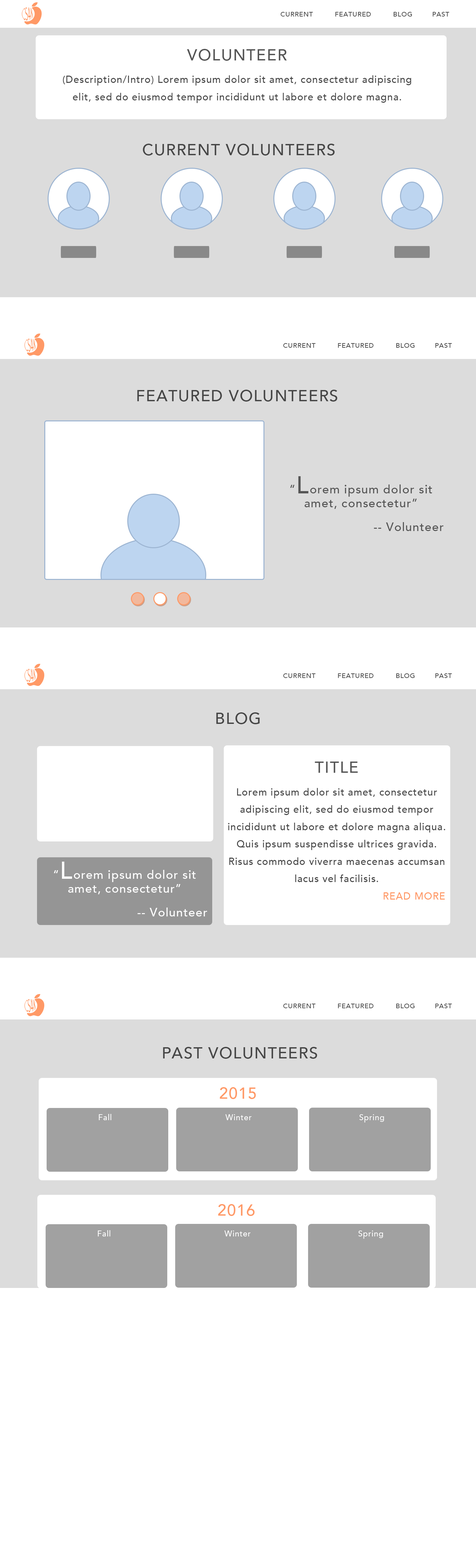
<style>
.page{position:relative;width:476px;height:1568px;background:#ffffff}
.page>*{position:absolute;margin:0}
.t1{font:6.7px "Avenir-Medium";letter-spacing:0.05em;color:#464646}
.t2{font:10px "Avenir-Medium";letter-spacing:0.05em;color:#464646}
.t3{font:16px "Avenir-Medium";letter-spacing:0.05em;color:#555555}
.t4{font:16px "Avenir-Medium";letter-spacing:0.05em;color:#464646}
.t5{font:12px/23.8px "Avenir-Medium";letter-spacing:0.05em;color:#555555}
.t6{font:24px/23.8px "Avenir-Medium";letter-spacing:0.05em;color:#555555}
.t7{font:10px "Avenir-Medium";letter-spacing:0.05em;color:#ff9966}
.t8{font:12px/23.8px "Avenir-Medium";letter-spacing:0.05em;color:#ffffff}
.t9{font:24px/23.8px "Avenir-Medium";letter-spacing:0.05em;color:#ffffff}
.t10{font:16px "Avenir-Medium";letter-spacing:0.05em;color:#ff9966}
.t11{font:8px "Avenir-Medium";letter-spacing:0.05em;color:#ffffff}
</style>
<div class="page">
<p class="t1" style="left:280px;top:12px;width:169px;height:5px">CURRENT          FEATURED          BLOG         PAST</p>
<p class="t2" style="left:63px;top:49px;width:348px;height:54px;text-align:center"><span class="t3">VOLUNTEER<br></span>(Description/Intro) Lorem ipsum dolor sit amet, consectetur adipiscing elit, sed do eiusmod tempor incididunt ut labore et dolore magna.</p>
<p class="t4" style="left:143px;top:144px;width:192px;height:12px">CURRENT VOLUNTEERS</p>
<p class="t1" style="left:283px;top:343px;width:168px;height:5px">CURRENT          FEATURED          BLOG         PAST</p>
<p class="t4" style="left:137px;top:390px;width:200px;height:12px">FEATURED VOLUNTEERS</p>
<p class="t5" style="left:290px;top:476px;width:153px;height:55px;text-align:center">“<span class="t6">L</span>orem ipsum dolor sit amet, consectetur”<br>        -- Volunteer</p>
<p class="t1" style="left:283px;top:673px;width:168px;height:5px">CURRENT          FEATURED          BLOG         PAST</p>
<p class="t4" style="left:216px;top:712px;width:44px;height:12px">BLOG</p>
<p class="t2" style="left:228px;top:762px;width:217px;height:138px;text-align:center"><span class="t3">TITLE<br></span>Lorem ipsum dolor sit amet, consectetur adipiscing elit, sed do eiusmod tempor incididunt ut labore et dolore magna aliqua. Quis ipsum suspendisse ultrices gravida. Risus commodo viverra maecenas accumsan lacus vel facilisis. <br><span class="t7">             READ MORE</span></p>
<p class="t8" style="left:54px;top:862px;width:153px;height:54px;text-align:center">“<span class="t9">L</span>orem ipsum dolor sit amet, consectetur”<br>        -- Volunteer</p>
<p class="t1" style="left:283px;top:1004px;width:168px;height:4px">CURRENT          FEATURED          BLOG         PAST</p>
<p class="t4" style="left:163px;top:1047px;width:154px;height:12px">PAST VOLUNTEERS</p>
<p class="t10" style="left:220px;top:1087px;width:36px;height:12px">2015</p>
<p class="t11" style="left:99px;top:1114px;width:12px;height:6px">Fall</p>
<p class="t11" style="left:225px;top:1114px;width:26px;height:6px">Winter</p>
<p class="t11" style="left:359px;top:1114px;width:25px;height:9px">Spring</p>
<p class="t10" style="left:218px;top:1204px;width:36px;height:12px">2016</p>
<p class="t11" style="left:98px;top:1230px;width:12px;height:6px">Fall</p>
<p class="t11" style="left:224px;top:1230px;width:26px;height:6px">Winter</p>
<p class="t11" style="left:358px;top:1230px;width:25px;height:9px">Spring</p>
</div>
